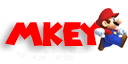
<style>
.page{position:relative;width:128px;height:64px;background:#ffffff}
.page>*{position:absolute;margin:0}
.t1{font:31.9px "SuperMario286RUSBYLYAJKA";color:#ff0000;scale:1.03 1}
</style>
<div class="page">
<p class="t1" style="left:5px;top:22px;width:97px;height:24px">MKEY</p>
</div>
